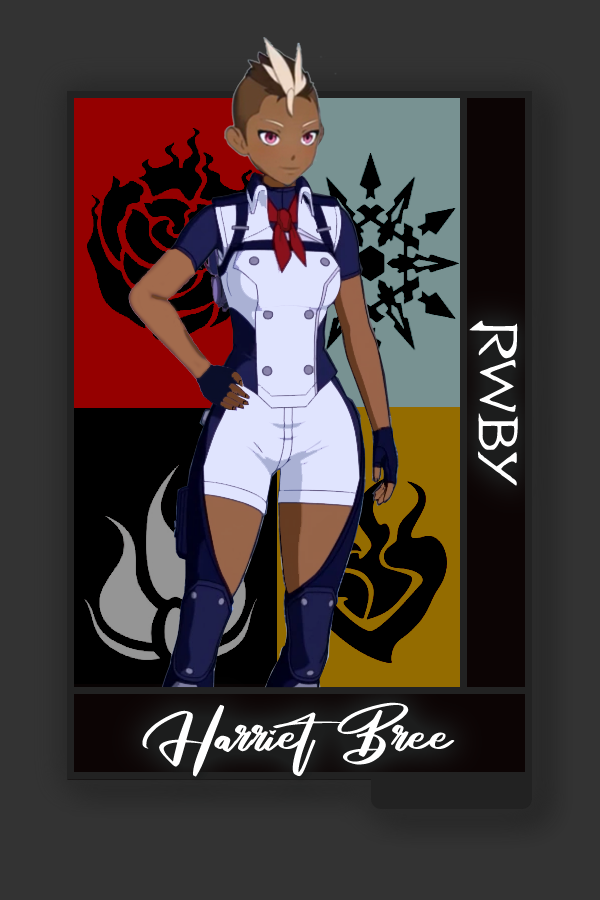
<style>
.page{position:relative;width:600px;height:900px;background:#333333}
.page>*{position:absolute;margin:0}
.t1{font:61.3px "RWBY_Style";color:#ffffff;scale:1.25 1}
.t2{font:75px "RosegaFREE";color:#ffffff}
</style>
<div class="page">
<p class="t1" style="left:469px;top:320px;width:49px;height:166px;rotate:90deg">RWBY</p>
<p class="t2" style="left:141px;top:702px;width:314px;height:75px">Harriet Bree</p>
</div>
